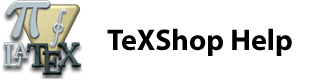
<style>
.page{position:relative;width:320px;height:80px;background:#ffffff}
.page>*{position:absolute;margin:0}
.t1{font:30px "MyriadPro-Bold";color:#000000}
</style>
<div class="page">
<p class="t1" style="left:107px;top:28px;width:185px;height:28px">TeXShop Help</p>
</div>
